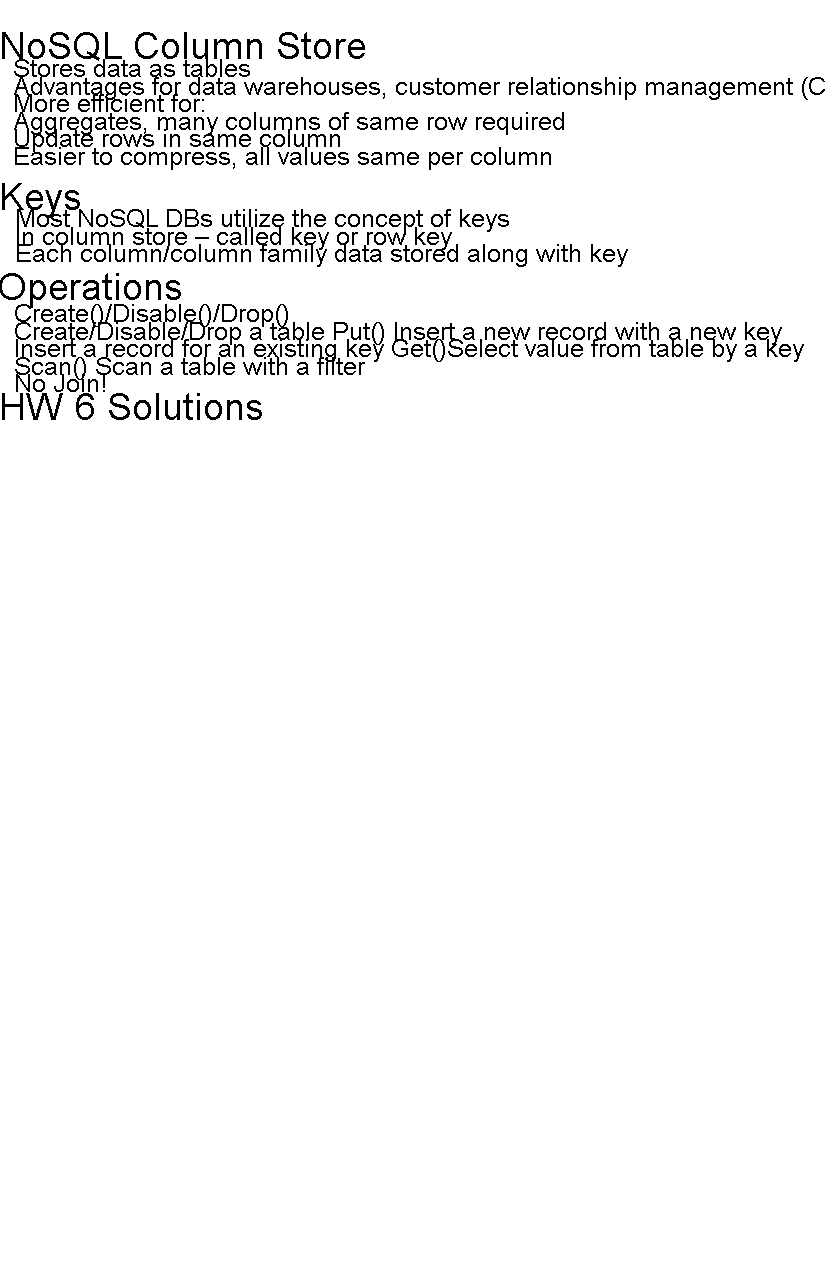
<style>
.page{position:relative;width:825px;height:1275px;background:#ffffff}
.page>*{position:absolute;margin:0}
.t1{font:37.5px "ArialMT";color:#000000}
.t2{font:25px/17.5px "ArialMT";color:#000000}
</style>
<div class="page">
<p class="t1" style="left:2px;top:32px;width:363px;height:29px">NoSQL Column Store</p>
<p class="t1" style="left:2px;top:183px;width:78px;height:35px">Keys</p>
<p class="t2" style="left:17px;top:209px;width:611px;height:58px">Most NoSQL DBs utilize the concept of keys<br>In column store – called key or row key<br>Each column/column family data stored along with key</p>
<p class="t1" style="left:0px;top:273px;width:181px;height:35px">Operations</p>
<p class="t2" style="left:15px;top:304px;width:789px;height:88px">Create()/Disable()/Drop()<br>Create/Disable/Drop a table Put() Insert a new record with a new key<br>Insert a record for an existing key Get()Select value from table by a key<br>Scan() Scan a table with a filter<br>No Join!</p>
<p class="t1" style="left:2px;top:393px;width:260px;height:27px">HW 6 Solutions</p>
</div>
